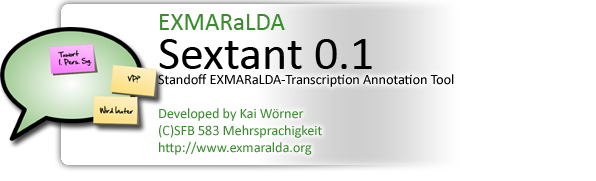
<style>
.page{position:relative;width:596px;height:181px;background:#ffffff}
.page>*{position:absolute;margin:0}
.t1{font:25.4px "Calibri";letter-spacing:-0.005em;color:#3b8b2f}
.t2{font:48.4px "Calibri";letter-spacing:-0.005em;color:#000000}
.t3{font:14.3px "Calibri";letter-spacing:-0.005em;color:#3b8b2f}
.t4{font:14.3px "Calibri";letter-spacing:-0.005em;color:#000000}
.t5{font:9.5px "Calibri";letter-spacing:-0.005em;color:#3b8b2f}
.t6{font:9.5px "Calibri";letter-spacing:-0.005em;color:#898989}
</style>
<div class="page">
<p class="t1" style="left:160px;top:14px;width:125px;height:16px">EXMARaLDA</p>
<p class="t2" style="left:159px;top:39px;width:213px;height:30px">Sextant 0.1</p>
<p class="t3" style="left:158px;top:74px;width:296px;height:81px"><span class="t4">Standoff EXMARaLDA-Transcription Annotation Tool<br></span><br>Developed by Kai Wörner<br>(C)SFB 583 Mehrsprachigkeit<br>http://www.exmaralda.org<br><span class="t5"><br></span><span class="t6">This program is licensed under the GNU lesser public licennse (LGPL)</span></p>
</div>
